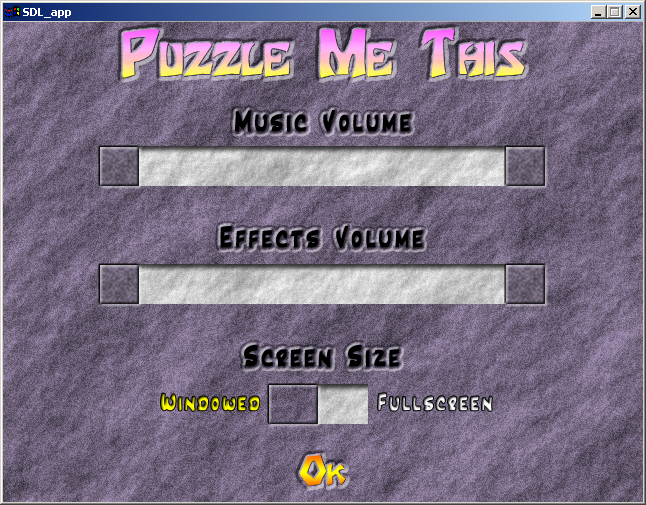
<style>
.page{position:relative;width:646px;height:505px}
.page>*{position:absolute;margin:0}
.t1{font:54px "Houters-Normal";font-variant:small-caps;font-weight:bold}
.t2{font:30px "Inkpen2Script";letter-spacing:0.1em;color:#000000;font-weight:bold}
.t3{font:24px "Inkpen2Script";letter-spacing:0.1em;font-weight:bold}
.t4{font:34px "Houters-Normal";font-variant:small-caps;font-weight:bold}
</style>
<div class="page">
<p class="t1" style="left:122px;top:29px;width:403px;height:49px">Puzzle Me This</p>
<p class="t2" style="left:235px;top:110px;width:176px;height:22px">Music Volume</p>
<p class="t2" style="left:220px;top:226px;width:203px;height:22px">Effects Volume</p>
<p class="t2" style="left:244px;top:344px;width:156px;height:24px">Screen Size</p>
<p class="t3" style="left:161px;top:393px;width:99px;height:18px">Windowed</p>
<p class="t3" style="left:378px;top:393px;width:114px;height:18px">Fullscreen</p>
<p class="t4" style="left:300px;top:455px;width:46px;height:31px">Ok</p>
</div>
